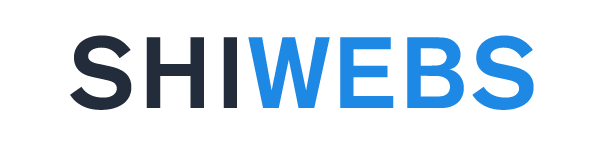
<style>
.page{position:relative;width:591px;height:146px;background:#ffffff}
.page>*{position:absolute;margin:0}
.t1{font:100px "AkzidenzGroteskBE-Md";color:#1e88e5}
.t2{font:100px "AkzidenzGroteskBE-Md";color:#232c3b}
</style>
<div class="page">
<p class="t1" style="left:70px;top:35px;width:464px;height:75px"><span class="t2">SHI</span>WEBS</p>
</div>
